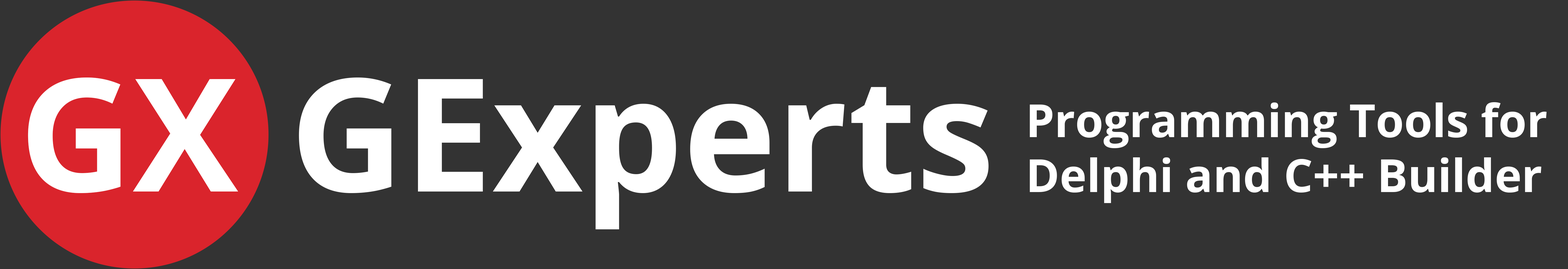
<style>
.page{position:relative;width:1568px;height:269px;background:#333333}
.page>*{position:absolute;margin:0}
.t1{font:157.6px "OpenSans-Bold";color:#ffffff}
.t2{font:45.7px "OpenSans-Bold";color:#ffffff}
</style>
<div class="page">
<p class="t1" style="left:299px;top:78px;width:690px;height:151px">GExperts</p>
<p class="t2" style="left:1030px;top:102px;width:517px;height:101px">Programming Tools for Delphi and C++ Builder</p>
</div>
